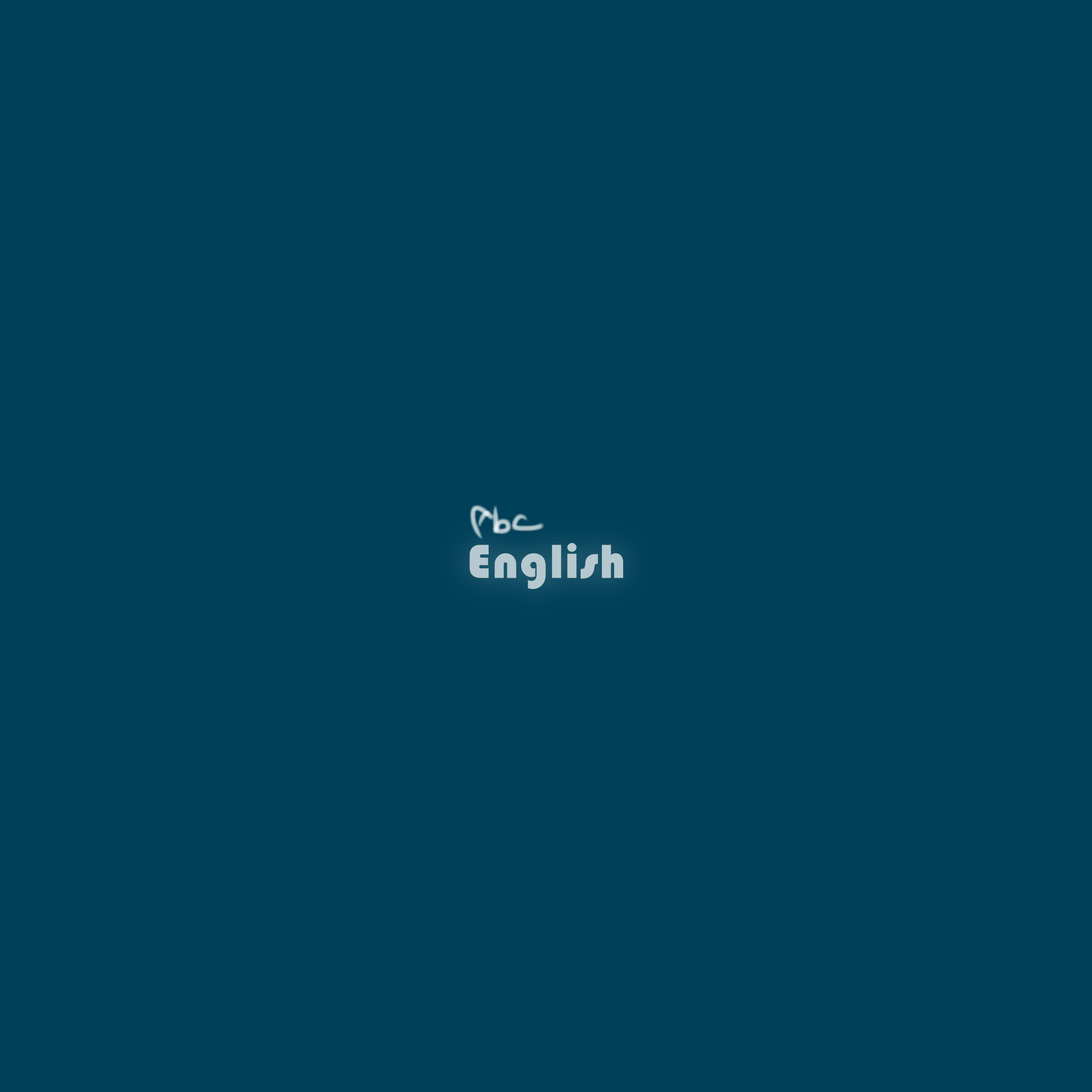
<style>
.page{position:relative;width:1092px;height:1092px;background:#004058}
.page>*{position:absolute;margin:0}
.t1{font:49.4px "Bauhaus93";letter-spacing:0.022em;color:#b5c8cf}
</style>
<div class="page">
<p class="t1" style="left:469px;top:543px;width:154px;height:46px">English</p>
</div>
